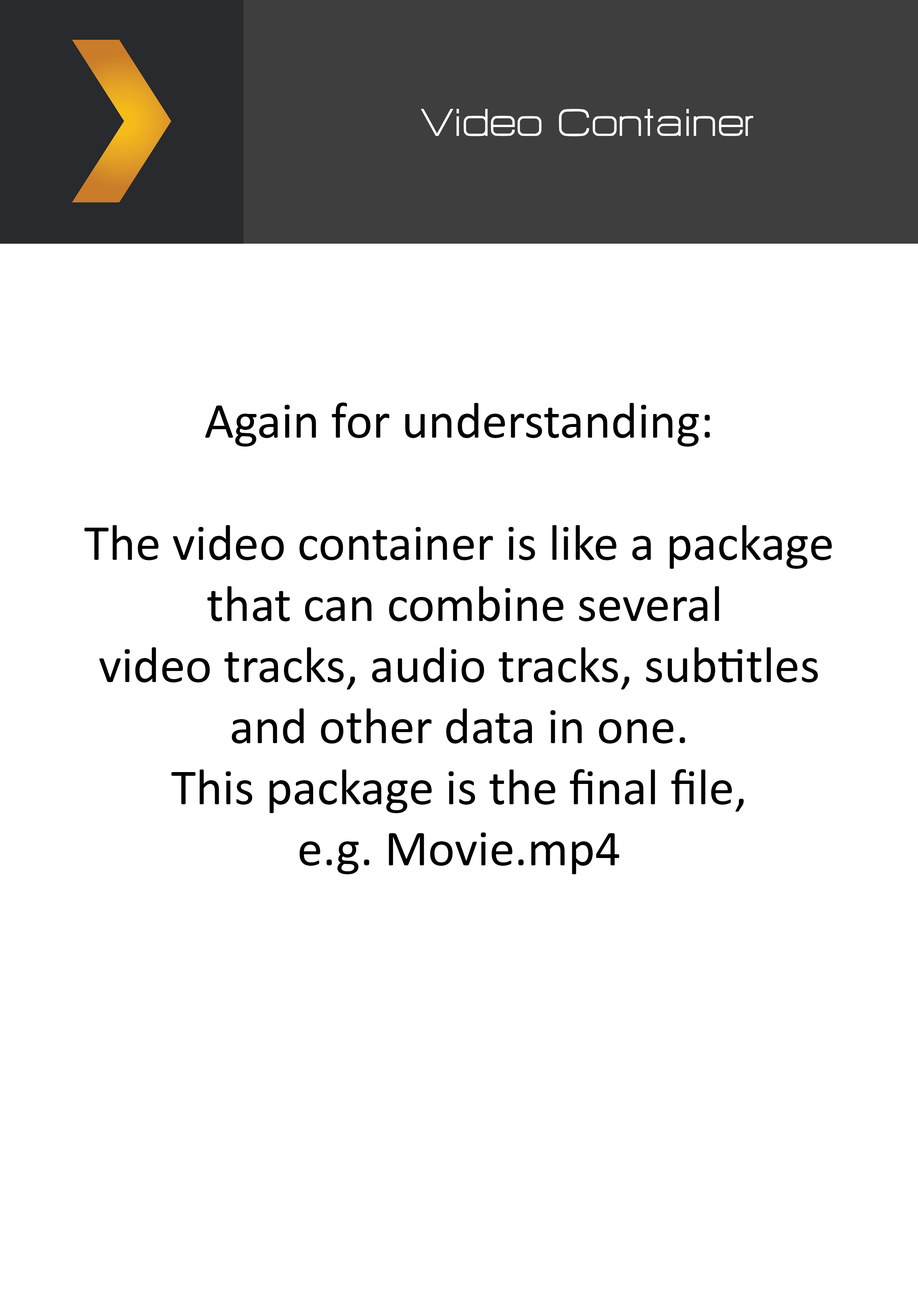
<style>
.page{position:relative;width:918px;height:1299px;background:#ffffff}
.page>*{position:absolute;margin:0}
.t1{font:47.8px "HURTMOLDPersonalUse-Regular";color:#ffffff}
.t2{font:50.9px "Calibri";color:#000000}
</style>
<div class="page">
<p class="t1" style="left:421px;top:109px;width:332px;height:27px">Video Container</p>
<p class="t2" style="left:84px;top:402px;width:748px;height:472px;text-align:center">Again for understanding:<br><br>The video container is like a package<br> that can combine several<br>video tracks, audio tracks, subtitles<br>and other data in one.<br>This package is the final file,<br>e.g. Movie.mp4</p>
</div>
